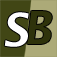
<style>
.page{position:relative;width:57px;height:57px;background:#414615}
.page>*{position:absolute;margin:0}
.t1{font:45.8px "LucidaGrande-Bold";color:#ffffff}
.t2{font:45.8px "LucidaGrande-Bold";color:#2f330b}
</style>
<div class="page">
<p class="t1" style="left:4px;top:12px;width:25px;height:35px">S</p>
<p class="t2" style="left:27px;top:11px;width:25px;height:33px">B</p>
</div>
